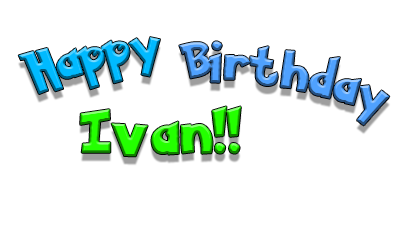
<style>
.page{position:relative;width:411px;height:227px;background:#ffffff}
.page>*{position:absolute;margin:0}
.t1{font:40px "PokemonSolidNormal";letter-spacing:0.1em}
.t2{font:48px "PokemonSolidNormal";letter-spacing:0.1em}
</style>
<div class="page">
<p class="t1" style="left:18px;top:37px;width:142px;height:57px;rotate:-14deg">Happy</p>
<p class="t1" style="left:179px;top:41px;width:211px;height:85px;rotate:10deg">Birthday</p>
<p class="t2" style="left:80px;top:106px;width:161px;height:51px">Ivan!!</p>
</div>
